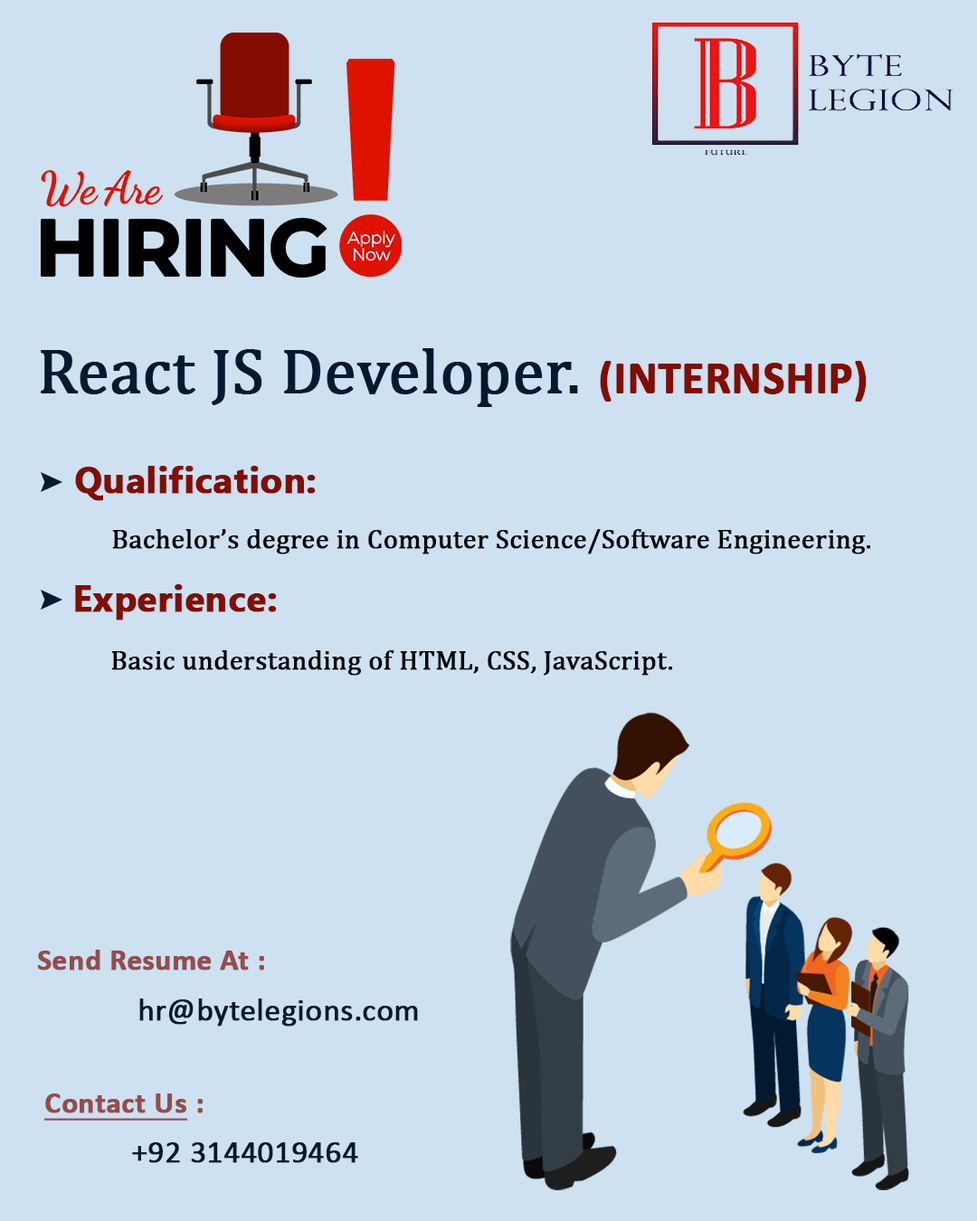
<style>
.page{position:relative;width:977px;height:1221px;background:#cde1f1}
.page>*{position:absolute;margin:0}
.t1{font:63.3px "Cambria";color:#021a30;font-weight:bold}
.t2{font:45.2px "Calibri-Bold";color:#830d01;font-weight:bold}
.t3{font:36.2px "MyanmarText-Bold";color:#830d01;font-weight:bold}
.t4{font:27.1px "Cambria";color:#000000;font-weight:bold}
.t5{font:29.8px "Calibri-Bold";color:#944d4c;font-weight:bold}
.t6{font:31.7px "Calibri";color:#021a30;font-weight:bold}
.t7{font:29.8px "Calibri-Bold";letter-spacing:0.005em;color:#944d4c;font-weight:bold;text-decoration:underline}
.t8{font:29.8px "Calibri-Bold";letter-spacing:0.005em;color:#944d4c;font-weight:bold}
</style>
<div class="page">
<p class="t1" style="left:41px;top:348px;width:825px;height:59px">React JS Developer. <span class="t2">(INTERNSHIP)</span></p>
<p class="t3" style="left:75px;top:466px;width:241px;height:35px">Qualification:</p>
<p class="t4" style="left:112px;top:529px;width:758px;height:25px">Bachelor’s degree in Computer Science/Software Engineering.</p>
<p class="t3" style="left:75px;top:584px;width:202px;height:36px">Experience:</p>
<p class="t4" style="left:111px;top:650px;width:561px;height:26px">Basic understanding of HTML, CSS, JavaScript.</p>
<p class="t5" style="left:38px;top:950px;width:226px;height:20px">Send Resume At :</p>
<p class="t6" style="left:139px;top:998px;width:279px;height:28px">hr@bytelegions.com</p>
<p class="t7" style="left:44px;top:1093px;width:159px;height:27px">Contact Us<span class="t8"> :</span></p>
<p class="t6" style="left:132px;top:1142px;width:226px;height:21px">+92 3144019464</p>
</div>
